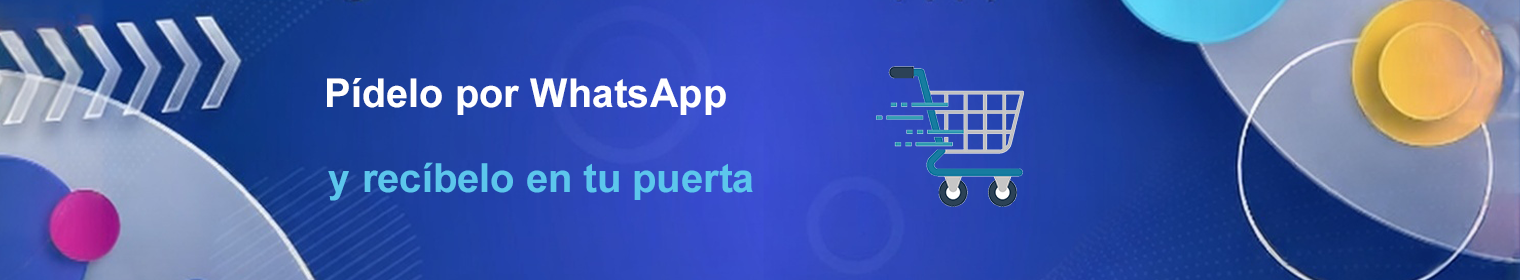
<style>
.page{position:relative;width:1520px;height:280px}
.page>*{position:absolute;margin:0}
.t1{font:39.8px "Arial-BoldMT";color:#ffffff}
.t2{font:39.9px "Arial-BoldMT";color:#5cc6ec}
</style>
<div class="page">
<p class="t1" style="left:327px;top:78px;width:399px;height:37px">Pídelo por WhatsApp</p>
<p class="t2" style="left:328px;top:162px;width:425px;height:39px">y recíbelo en tu puerta</p>
</div>
